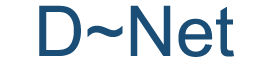
<style>
.page{position:relative;width:260px;height:70px;background:#ffffff}
.page>*{position:absolute;margin:0}
.t1{font:70px "ArialMT";color:#1a4e76}
</style>
<div class="page">
<p class="t1" style="left:39px;top:5px;width:195px;height:52px">D~Net</p>
</div>
